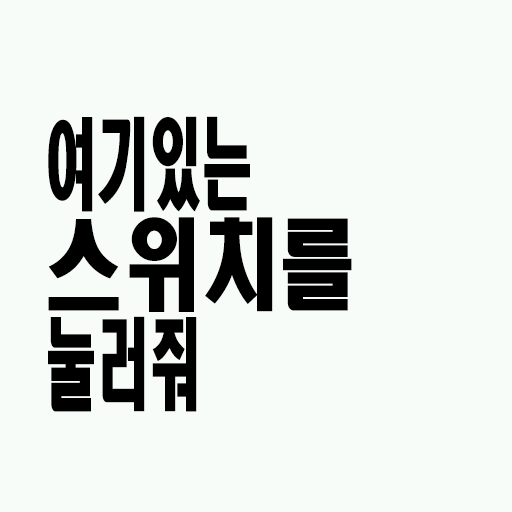
<style>
.page{position:relative;width:512px;height:512px;background:#f8fcf8}
.page>*{position:absolute;margin:0}
.t1{font:98.8px/100px "HeadlineR-HM";color:#000000;scale:0.53 1}
.t2{font:98.8px/100px "HeadlineR-HM";color:#000000;scale:0.79 1}
</style>
<div class="page">
<p class="t1" style="left:48px;top:116px;width:304px;height:296px">여기있는<br><span class="t2">스위치를<br></span>눌러줘</p>
</div>
